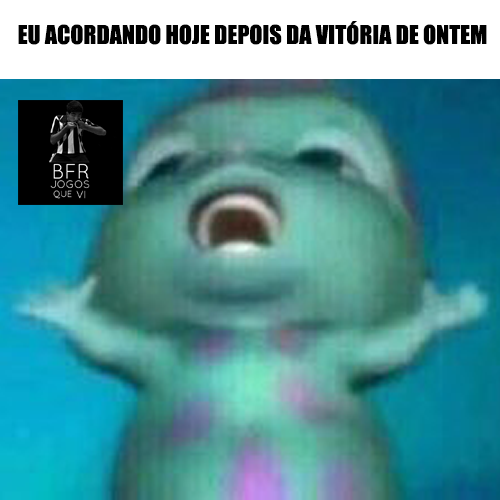
<style>
.page{position:relative;width:500px;height:500px}
.page>*{position:absolute;margin:0}
.t1{font:24px "Impact";color:#000000}
</style>
<div class="page">
<p class="t1" style="left:18px;top:21px;width:469px;height:24px">EU ACORDANDO HOJE DEPOIS DA VITÓRIA DE ONTEM</p>
</div>
